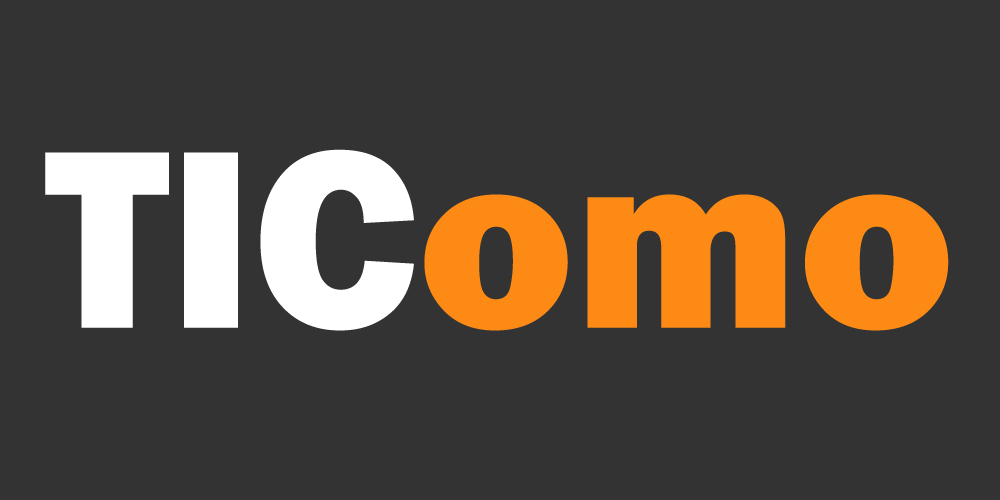
<style>
.page{position:relative;width:1000px;height:500px;background:#333333}
.page>*{position:absolute;margin:0}
.t1{font:262.5px "FranklinGothic-Heavy";color:#ffffff}
.t2{font:262.5px "FranklinGothic-Heavy";color:#fc8a15}
</style>
<div class="page">
<p class="t1" style="left:45px;top:149px;width:904px;height:182px">TIC<span class="t2">omo</span></p>
</div>
